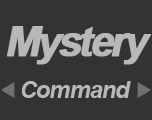
<style>
.page{position:relative;width:152px;height:120px;background:#333333}
.page>*{position:absolute;margin:0}
.t1{font:42.3px "Arial-BoldMT";letter-spacing:-0.1em;color:#b8b8b8;font-weight:bold;font-style:italic}
.t2{font:24px "Arial-BoldItalicMT";letter-spacing:-0.05em;color:#b8b8b8}
</style>
<div class="page">
<p class="t1" style="left:6px;top:26px;width:146px;height:39px">Mystery</p>
<p class="t2" style="left:21px;top:81px;width:110px;height:17px">Command</p>
</div>
